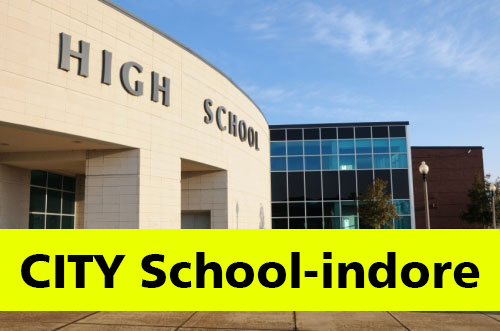
<style>
.page{position:relative;width:500px;height:331px;background:#eaff00}
.page>*{position:absolute;margin:0}
.t1{font:48px "Humanist777BT-BlackB";color:#000000}
</style>
<div class="page">
<p class="t1" style="left:21px;top:252px;width:459px;height:36px">CITY School-indore</p>
</div>
